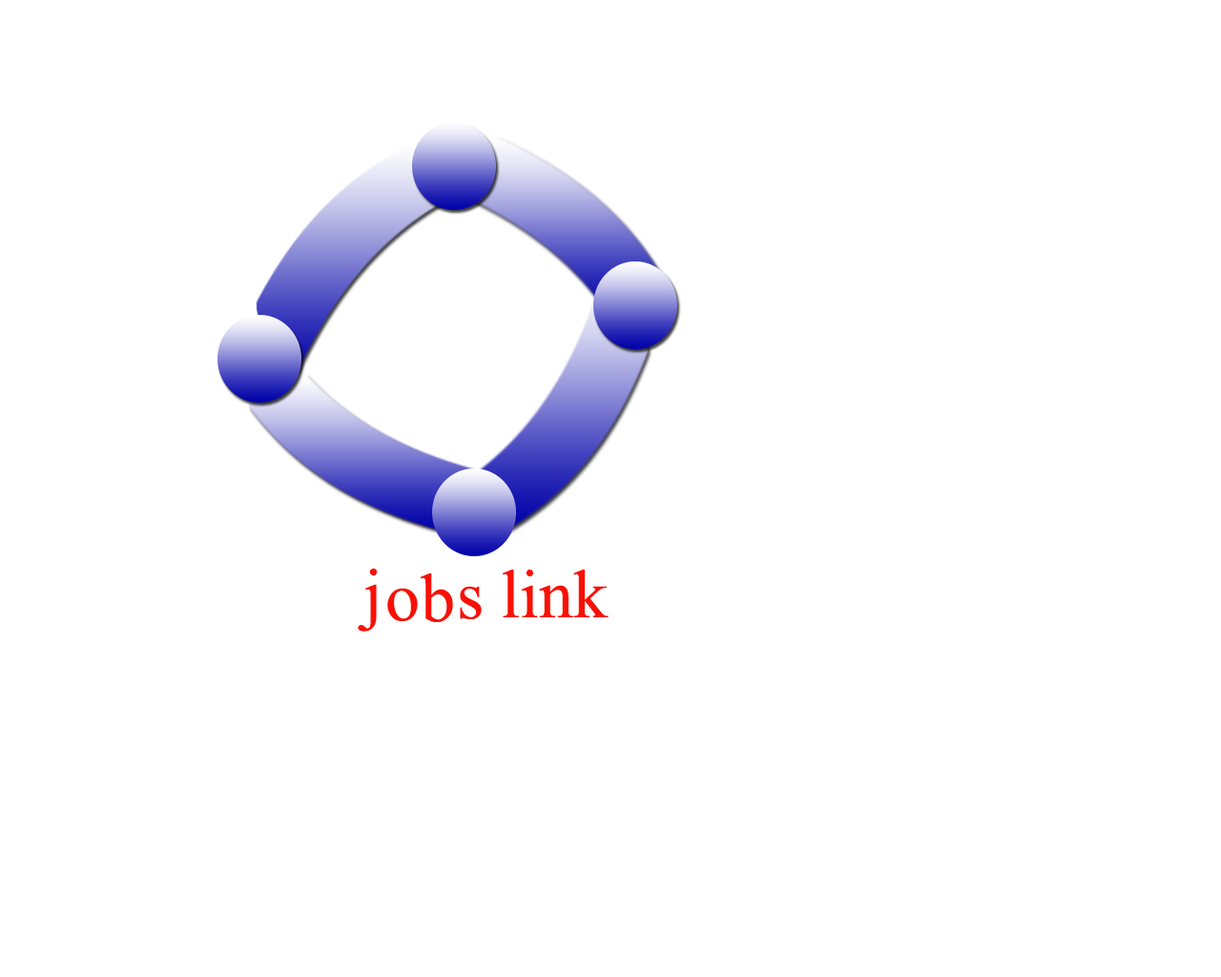
<style>
.page{position:relative;width:1221px;height:977px;background:#ffffff}
.page>*{position:absolute;margin:0}
.t1{font:68.7px "TimesNewRomanPSMT";color:#f81006}
</style>
<div class="page">
<p class="t1" style="left:358px;top:568px;width:20px;height:63px">j</p>
<p class="t1" style="left:503px;top:569px;width:106px;height:48px">link</p>
<p class="t1" style="left:420px;top:573px;width:33px;height:49px">b</p>
<p class="t1" style="left:387px;top:588px;width:31px;height:33px">o</p>
<p class="t1" style="left:460px;top:586px;width:22px;height:33px">s</p>
</div>
